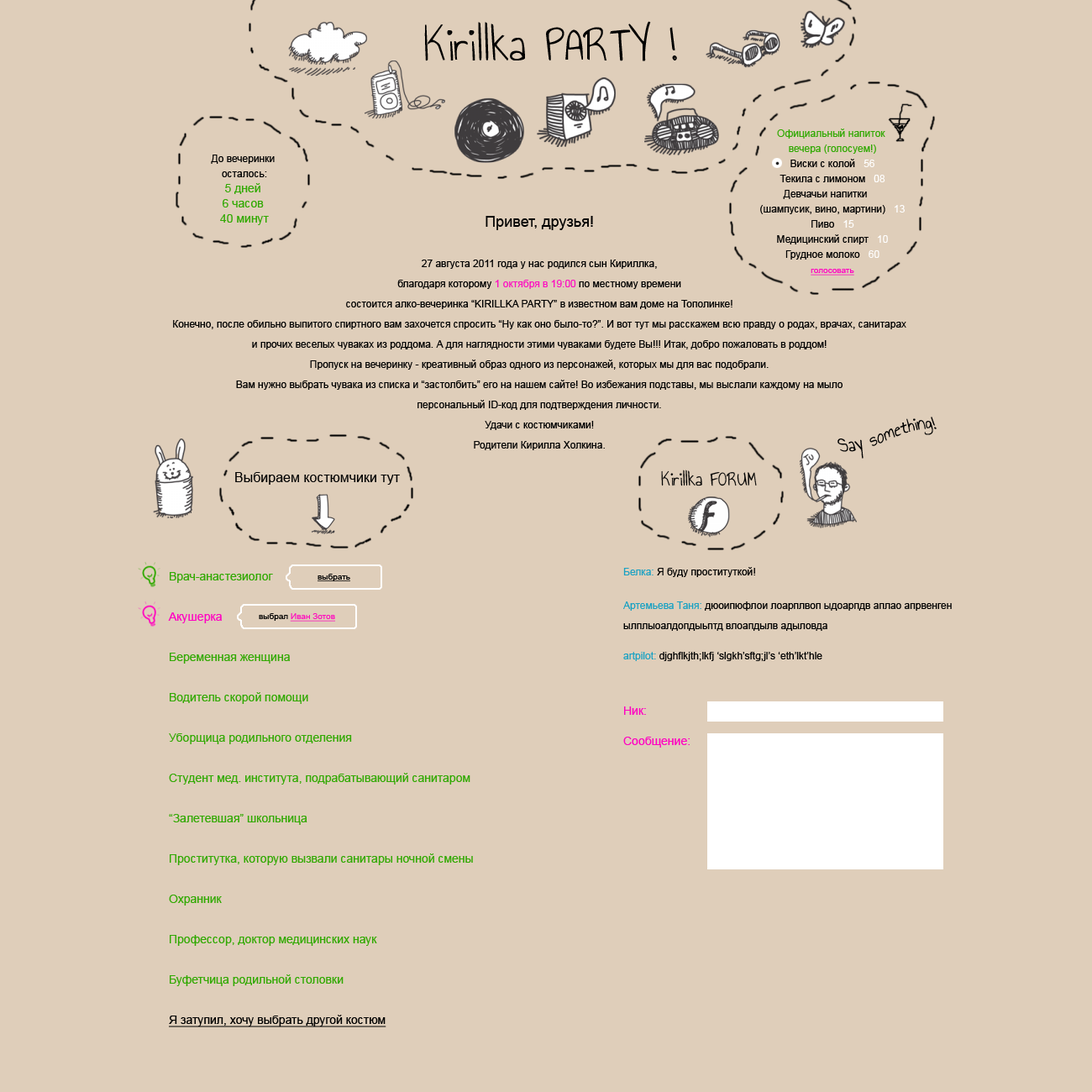
<style>
.page{position:relative;width:1092px;height:1092px;background:#dfceba}
.page>*{position:absolute;margin:0}
.t1{font:50.4px "AnnieUseYourTelescope";color:#000000}
.t2{font:10.1px/15.1px "ArialMT";color:#000000}
.t3{font:10.1px/15.1px "ArialMT";color:#31a902}
.t4{font:10.1px/15.1px "ArialMT";color:#ffffff}
.t5{font:10.1px/15.1px "ArialMT";color:#fefefe}
.t6{font:8.4px/15.1px "ArialMT";color:#ff00c2;text-decoration:underline}
.t7{font:11.8px/15.1px "ArialMT";color:#31a902}
.t8{font:10.1px/20.2px "ArialMT";color:#000000}
.t9{font:15.1px/20.2px "ArialMT";color:#000000}
.t10{font:10.1px/20.2px "ArialMT";color:#fd0ec1}
.t11{font:20.2px "AnnieUseYourTelescope";color:#000000}
.t12{font:13.4px "ArialMT";color:#000000}
.t13{font:20.2px "AnnieUseYourTelescope";color:#010101}
.t14{font:10.1px/33.6px "ArialMT";color:#000000}
.t15{font:10.1px/30.2px "ArialMT";color:#19a1c3}
.t16{font:10.1px/30.2px "ArialMT";color:#000000}
.t17{font:10.1px/33.6px "ArialMT";color:#19a1c3}
.t18{font:11.8px/25.2px "ArialMT";color:#ff00c2}
.t19{font:11.8px/30.2px "ArialMT";color:#ff00c2}
.t20{font:11.8px/20.2px "ArialMT";color:#31a902}
.t21{font:11.8px/20.2px "ArialMT";color:#ff00c2}
.t22{font:11.8px/20.2px "ArialMT";color:#000000;text-decoration:underline}
.t23{font:8.4px "ArialMT";color:#000000;text-decoration:underline}
.t24{font:8.4px "ArialMT";color:#ff0bbe;text-decoration:underline}
.t25{font:8.4px "ArialMT";color:#000000}
</style>
<div class="page">
<p class="t1" style="left:424px;top:21px;width:253px;height:40px">Kirillka PARTY !</p>
<p class="t2" style="left:760px;top:129px;width:145px;height:147px;text-align:center"><span class="t3">Официальный напиток <br>вечера (голосуем!)<br></span>Виски с колой   <span class="t4">56<br></span>Текила с лимоном   <span class="t4">08<br></span>Девчачьи напитки     <br>(шампусик, вино, мартини)   <span class="t4">13<br></span>Пиво   <span class="t4">15<br></span>Медицинский спирт  <span class="t5"> 10<br></span>Грудное молоко   <span class="t5">60<br></span><span class="t6">голосовать</span></p>
<p class="t7" style="left:211px;top:155px;width:64px;height:70px;text-align:center"><span class="t2">До вечеринки <br>осталось:<br></span>5 дней <br>6 часов <br>40 минут</p>
<p class="t8" style="left:173px;top:216px;width:733px;height:234px;text-align:center"><span class="t9">Привет, друзья!<br><br></span>27 августа 2011 года у нас родился сын Кириллка, <br>благодаря которому <span class="t10">1 октября в 19:00</span> по местному времени <br>состоится алко-вечеринка “KIRILLKA PARTY” в известном вам доме на Тополинке! <br>Конечно, после обильно выпитого спиртного вам захочется спросить “Ну как оно было-то?”. И вот тут мы расскажем всю правду о родах, врачах, санитарах <br>и прочих веселых чуваках из роддома. А для наглядности этими чуваками будете Вы!!! Итак, добро пожаловать в роддом! <br>Пропуск на вечеринку - креативный образ одного из персонажей, которых мы для вас подобрали. <br>Вам нужно выбрать чувака из списка и “застолбить” его на нашем сайте! Во избежания подставы, мы выслали каждому на мыло <br>персональный ID-код для подтверждения личности.<br>Удачи с костюмчиками!<br>Родители Кирилла Холкина.</p>
<p class="t11" style="left:837px;top:417px;width:100px;height:42px;rotate:-12deg">Say something!</p>
<p class="t12" style="left:235px;top:472px;width:165px;height:13px">Выбираем костюмчики тут</p>
<p class="t13" style="left:661px;top:470px;width:96px;height:16px">Kirillka FORUM</p>
<p class="t14" style="left:623px;top:567px;width:329px;height:181px"><span class="t15">Белка:</span><span class="t16"> Я буду проституткой!<br></span><span class="t17">Артемьева Таня:</span> дюоипюфлои лоарплвоп ыдоарпдв аплао апрвенген<br><span class="t8">ылплыоалдопдыьптд влоапдылв адыловда<br></span><span class="t15">artpilot:</span><span class="t16"> djghflkjth;lkfj ‘slgkh’sftg;jl’s ‘eth’lkt’hle<br><br></span><span class="t18">Ник:<br></span><span class="t19">Сообщение:</span></p>
<p class="t20" style="left:168px;top:572px;width:305px;height:455px">Врач-анастезиолог<br><br><span class="t21">Акушерка<br><br></span>Беременная женщина<br><br>Водитель скорой помощи<br><br>Уборщица родильного отделения<br><br>Студент мед. института, подрабатывающий санитаром <br><br>“Залетевшая” школьница<br><br>Проститутка, которую вызвали санитары ночной смены<br><br>Охранник<br><br>Профессор, доктор медицинских наук<br><br>Буфетчица родильной столовки<br><br><span class="t22">Я затупил, хочу выбрать другой костюм</span></p>
<p class="t23" style="left:318px;top:574px;width:32px;height:7px">выбрать</p>
<p class="t24" style="left:259px;top:613px;width:76px;height:9px"><span class="t25">выбрал </span>Иван Зотов</p>
</div>
